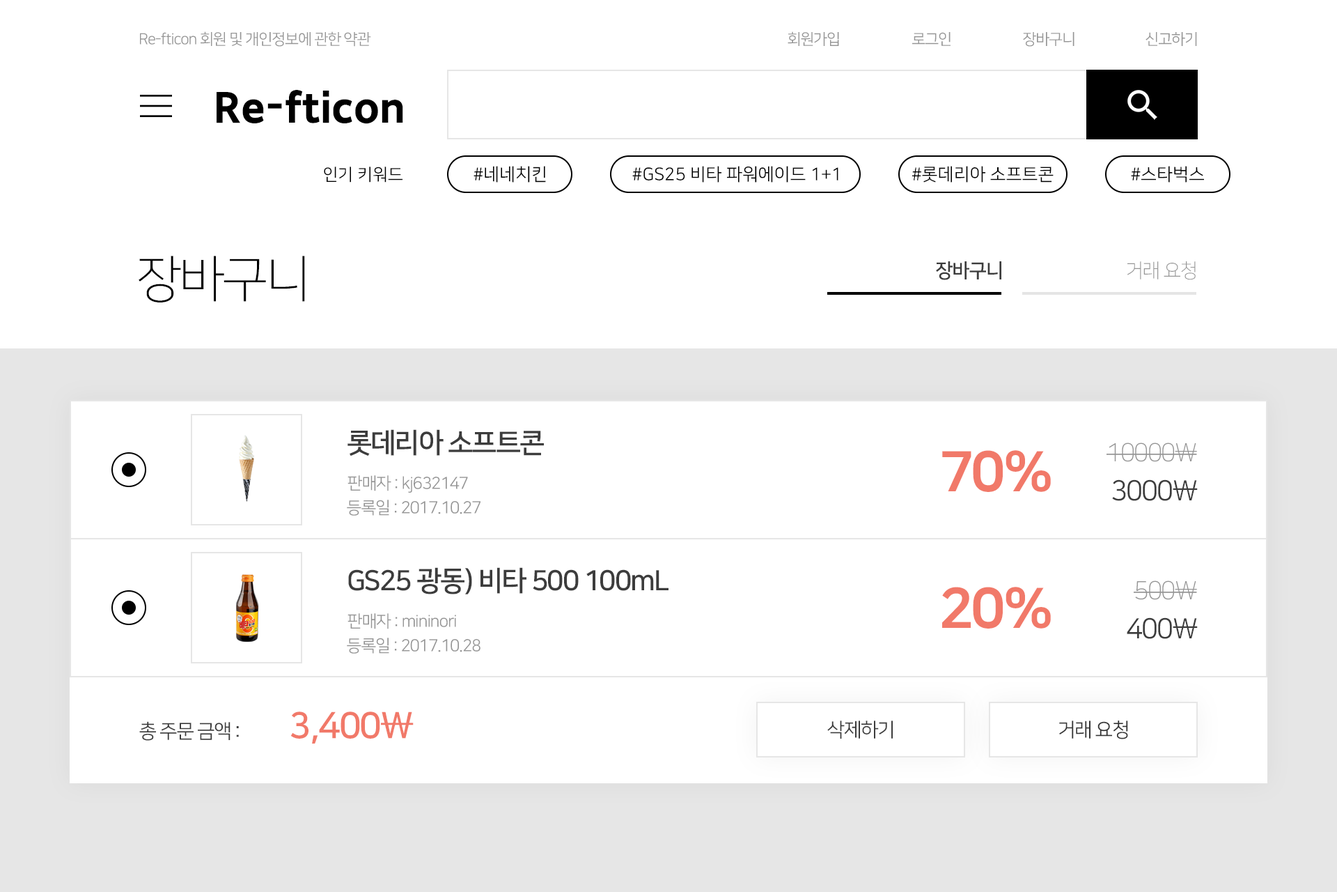
<style>
.page{position:relative;width:1337px;height:892px;background:#ffffff}
.page>*{position:absolute;margin:0}
.t1{font:15.3px "NanumSquareOTFR";letter-spacing:-0.05em;color:#959595}
.t2{font:41.8px "SDGothicNeoc-gExBd";color:#000000}
.t3{font:16.7px "NanumSquareOTFR";color:#000000}
.t4{font:17.6px "NanumSquareOTFR";color:#000000}
.t5{font:50.2px "NanumSquareOTFL";letter-spacing:-0.05em;color:#000000}
.t6{font:19.5px "NanumSquareOTFB";letter-spacing:-0.05em;color:#3c3c3c}
.t7{font:19.5px "NanumSquareOTFL";letter-spacing:-0.05em;color:#959595}
.t8{font:27.9px "NanumSquareOTFB";letter-spacing:-0.05em;color:#3c3c3c}
.t9{font:55.7px "NanumSquareOTFEB";letter-spacing:-0.05em;color:#f17969}
.t10{font:25.1px "NanumSquareOTFL";letter-spacing:-0.05em;color:#959595}
.t11{font:16.7px "NanumSquareOTFR";letter-spacing:-0.05em;color:#959595}
.t12{font:27.9px "NanumSquareOTFR";letter-spacing:-0.05em;color:#3c3c3c}
.t13{font:36.2px "NanumSquareOTFB";letter-spacing:-0.05em;color:#f17969}
.t14{font:19.5px "NanumSquareOTFR";letter-spacing:-0.05em;color:#3c3c3c}
.t15{font:19.5px "NanumSquareOTFR";letter-spacing:-0.05em;color:#353535}
</style>
<div class="page">
<p class="t1" style="left:140px;top:31px;width:231px;height:16px">Re-fticon 회원 및 개인정보에 관한 약관</p>
<p class="t1" style="left:788px;top:31px;width:51px;height:15px">회원가입</p>
<p class="t1" style="left:912px;top:32px;width:39px;height:14px">로그인</p>
<p class="t1" style="left:1023px;top:32px;width:52px;height:15px">장바구니</p>
<p class="t1" style="left:1146px;top:32px;width:51px;height:14px">신고하기</p>
<p class="t2" style="left:217px;top:90px;width:186px;height:34px">Re-fticon</p>
<p class="t3" style="left:324px;top:166px;width:79px;height:16px">인기 키워드</p>
<p class="t4" style="left:474px;top:166px;width:72px;height:16px">#네네치킨</p>
<p class="t4" style="left:632px;top:166px;width:207px;height:16px">#GS25 비타 파워에이드 1+1</p>
<p class="t4" style="left:912px;top:166px;width:142px;height:16px">#롯데리아 소프트콘</p>
<p class="t4" style="left:1131px;top:166px;width:73px;height:16px">#스타벅스</p>
<p class="t5" style="left:139px;top:256px;width:166px;height:46px">장바구니</p>
<p class="t6" style="left:936px;top:261px;width:66px;height:19px">장바구니</p>
<p class="t7" style="left:1127px;top:261px;width:69px;height:19px">거래 요청</p>
<p class="t8" style="left:348px;top:429px;width:196px;height:27px">롯데리아 소프트콘</p>
<p class="t9" style="left:942px;top:450px;width:109px;height:42px">70%</p>
<p class="t10" style="left:1107px;top:442px;width:90px;height:20px">10000\</p>
<p class="t11" style="left:348px;top:475px;width:120px;height:17px">판매자 : kj632147</p>
<p class="t12" style="left:1112px;top:479px;width:86px;height:22px">3000\</p>
<p class="t11" style="left:347px;top:499px;width:134px;height:16px">등록일 : 2017.10.27</p>
<p class="t8" style="left:348px;top:567px;width:321px;height:27px">GS25 광동) 비타 500 100mL</p>
<p class="t10" style="left:1134px;top:580px;width:63px;height:20px">500\</p>
<p class="t9" style="left:942px;top:587px;width:109px;height:41px">20%</p>
<p class="t11" style="left:348px;top:613px;width:108px;height:16px">판매자 : mininori</p>
<p class="t12" style="left:1127px;top:617px;width:71px;height:22px">400\</p>
<p class="t11" style="left:347px;top:637px;width:134px;height:16px">등록일 : 2017.10.28</p>
<p class="t13" style="left:290px;top:711px;width:124px;height:32px">3,400\</p>
<p class="t14" style="left:139px;top:721px;width:100px;height:19px">총 주문 금액 :</p>
<p class="t14" style="left:828px;top:720px;width:65px;height:18px">삭제하기</p>
<p class="t15" style="left:1059px;top:720px;width:69px;height:19px">거래 요청</p>
</div>
